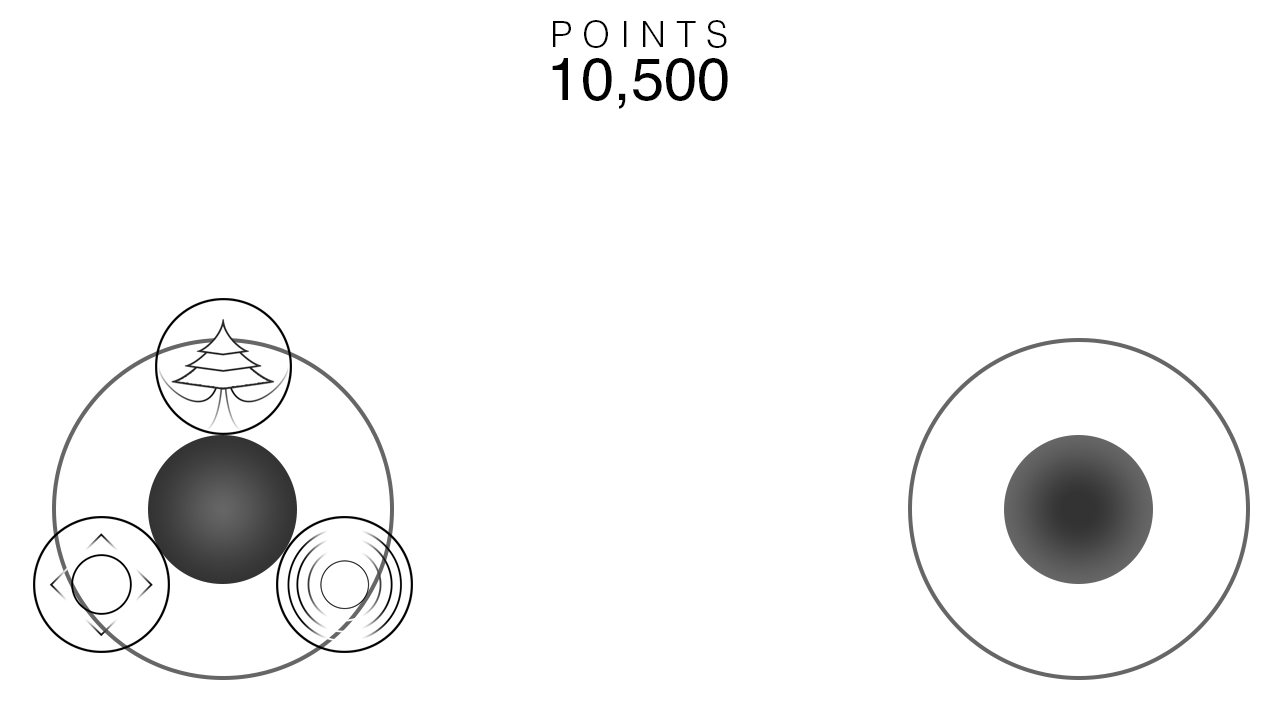
<style>
.page{position:relative;width:1280px;height:720px;background:#ffffff}
.page>*{position:absolute;margin:0}
.t1{font:36px/53px "Helvetica-Light";letter-spacing:0.28em;color:#000000}
.t2{font:60px/53px "Helvetica-Regular";color:#000000}
</style>
<div class="page">
<p class="t1" style="left:552px;top:20px;width:176px;height:89px;text-align:center">POINTS<br><span class="t2">10,500</span></p>
</div>
